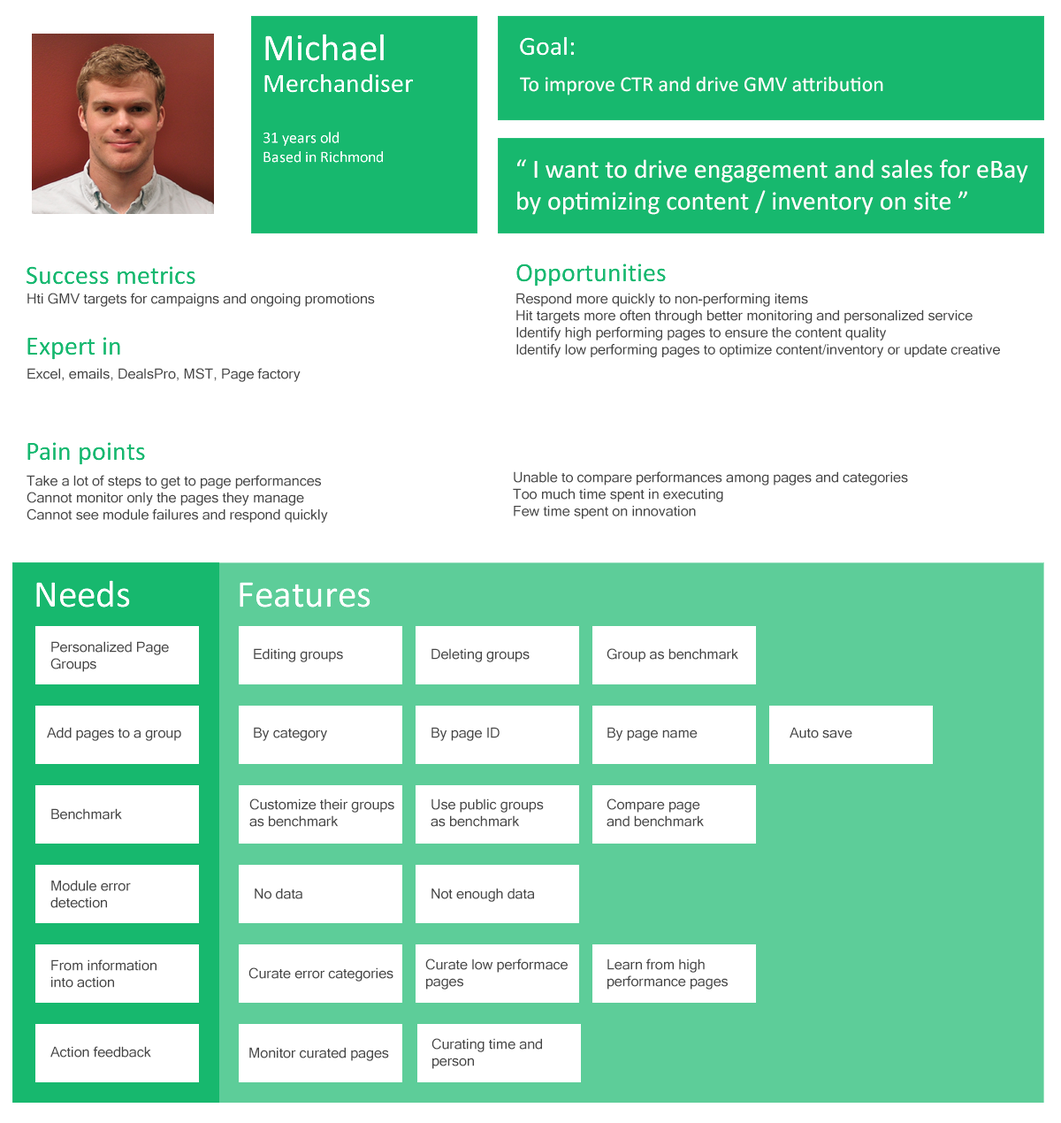
<style>
.page{position:relative;width:1061px;height:1123px;background:#ffffff}
.page>*{position:absolute;margin:0}
.t1{font:21.2px "Calibri";color:#ffffff}
.t2{font:26.5px "Calibri";color:#ffffff}
.t3{font:14.2px "MicrosoftSansSerif";color:#454545}
</style>
<div class="page">
<p class="t1" style="left:520px;top:76px;width:364px;height:20px">To improve CTR and drive GMV attribution</p>
<p class="t2" style="left:517px;top:159px;width:512px;height:56px">“ I want to drive engagement and sales for eBay by optimizing content / inventory on site ”</p>
<p class="t3" style="left:27px;top:293px;width:348px;height:14px">Hti GMV targets for campaigns and ongoing promotions</p>
<p class="t3" style="left:517px;top:293px;width:483px;height:65px">Respond more quickly to non-performing items<br>Hit targets more often through better monitoring and personalized service<br>Identify high performing pages to ensure the content quality <br>Identify low performing pages to optimize content/inventory or update creative</p>
<p class="t3" style="left:27px;top:368px;width:274px;height:14px">Excel, emails, DealsPro, MST, Page factory</p>
<p class="t3" style="left:513px;top:471px;width:395px;height:48px">Unable to compare performances among pages and categories<br>Too much time spent in executing<br>Few time spent on innovation</p>
<p class="t3" style="left:27px;top:475px;width:301px;height:48px">Take a lot of steps to get to page performances <br>Cannot monitor only the pages they manage<br>Cannot see module failures and respond quickly</p>
<p class="t3" style="left:50px;top:641px;width:119px;height:31px">Personalized Page Groups</p>
<p class="t3" style="left:254px;top:648px;width:89px;height:15px">Editing groups</p>
<p class="t3" style="left:432px;top:648px;width:98px;height:15px">Deleting groups</p>
<p class="t3" style="left:607px;top:648px;width:132px;height:15px">Group as benchmark</p>
<p class="t3" style="left:47px;top:727px;width:134px;height:14px">Add pages to a group</p>
<p class="t3" style="left:254px;top:727px;width:73px;height:14px">By category</p>
<p class="t3" style="left:432px;top:727px;width:68px;height:14px">By page ID</p>
<p class="t3" style="left:608px;top:727px;width:90px;height:14px">By page name</p>
<p class="t3" style="left:790px;top:727px;width:63px;height:12px">Auto save</p>
<p class="t3" style="left:51px;top:808px;width:71px;height:12px">Benchmark</p>
<p class="t3" style="left:249px;top:799px;width:146px;height:28px">Customize their groups as benchmark</p>
<p class="t3" style="left:431px;top:799px;width:113px;height:28px">Use public groups as benchmark</p>
<p class="t3" style="left:607px;top:799px;width:97px;height:28px">Compare page and benchmark</p>
<p class="t3" style="left:50px;top:880px;width:81px;height:28px">Module error detection</p>
<p class="t3" style="left:255px;top:888px;width:48px;height:12px">No data</p>
<p class="t3" style="left:432px;top:888px;width:102px;height:14px">Not enough data</p>
<p class="t3" style="left:51px;top:960px;width:106px;height:28px">From information into action</p>
<p class="t3" style="left:425px;top:959px;width:143px;height:31px">Curate low performace pages</p>
<p class="t3" style="left:608px;top:959px;width:120px;height:31px">Learn from high performance pages</p>
<p class="t3" style="left:249px;top:968px;width:145px;height:14px">Curate error categories</p>
<p class="t3" style="left:50px;top:1046px;width:101px;height:12px">Action feedback</p>
<p class="t3" style="left:249px;top:1047px;width:140px;height:14px">Monitor curated pages</p>
<p class="t3" style="left:432px;top:1038px;width:110px;height:31px">Curating time and person</p>
</div>
